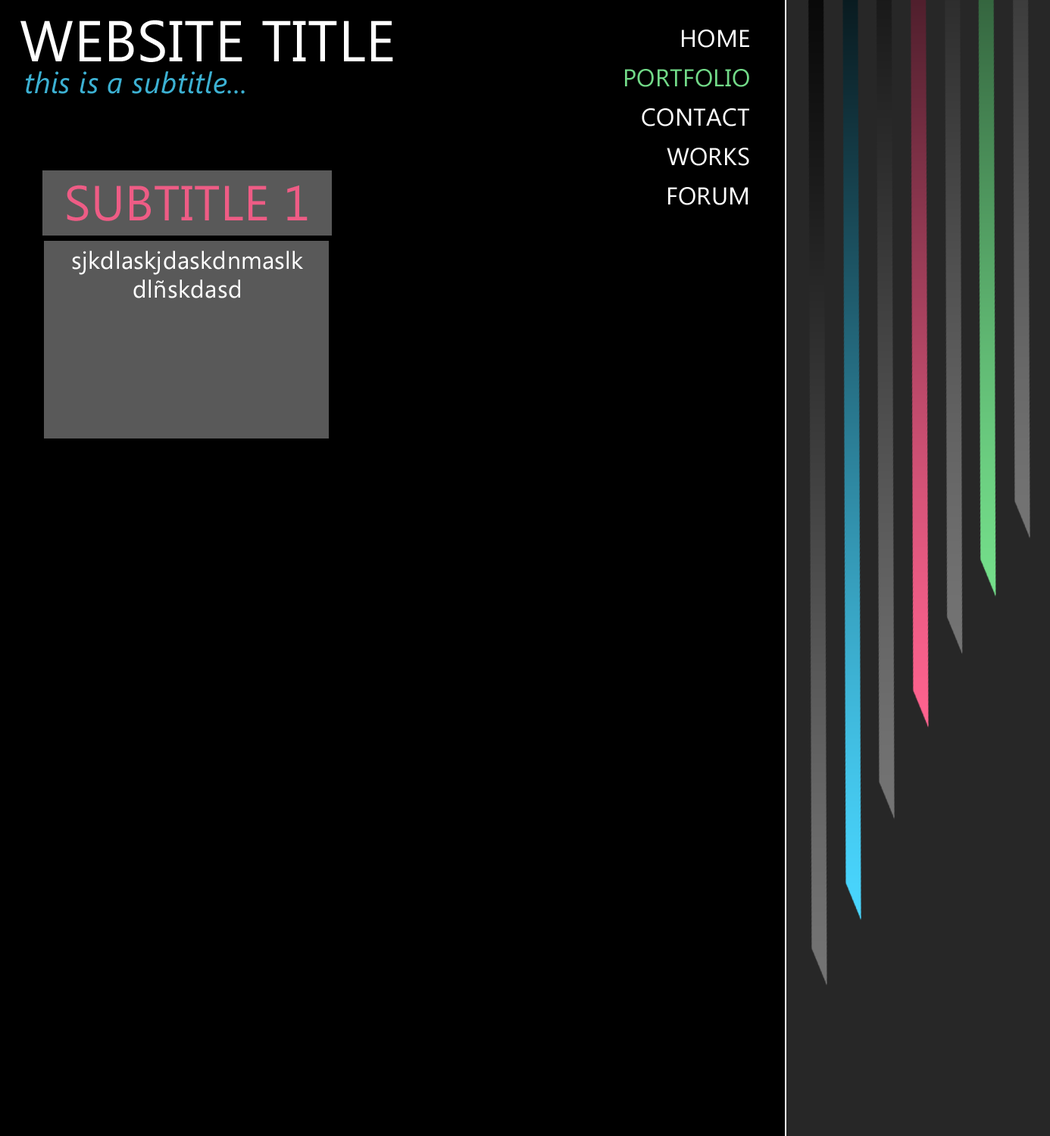
<style>
.page{position:relative;width:1050px;height:1136px;background:#000000}
.page>*{position:absolute;margin:0}
.t1{font:57.6px "SegoeUI";letter-spacing:0.01em;color:#ffffff}
.t2{font:24.2px/39.4px "SegoeUI";letter-spacing:0.01em;color:#ffffff}
.t3{font:24.2px/39.4px "SegoeUI";letter-spacing:0.01em;color:#72da88}
.t4{font:29.5px "SegoeUI-Italic";letter-spacing:0.01em;color:#3cb1d3}
.t5{font:49.2px "SegoeUI";letter-spacing:0.01em;color:#ee5c86}
.t6{font:24.2px "SegoeUI";letter-spacing:0.01em;color:#ffffff}
</style>
<div class="page">
<p class="t1" style="left:20px;top:20px;width:373px;height:42px">WEBSITE TITLE</p>
<p class="t2" style="left:625px;top:30px;width:124px;height:175px;text-align:right">HOME<br><span class="t3">PORTFOLIO<br></span>CONTACT <br>WORKS<br>FORUM</p>
<p class="t4" style="left:26px;top:71px;width:219px;height:23px">this is a subtitle...</p>
<p class="t5" style="left:67px;top:185px;width:240px;height:36px">SUBTITLE 1</p>
<p class="t6" style="left:72px;top:251px;width:231px;height:47px;text-align:center">sjkdlaskjdaskdnmaslkdlñskdasd</p>
</div>
